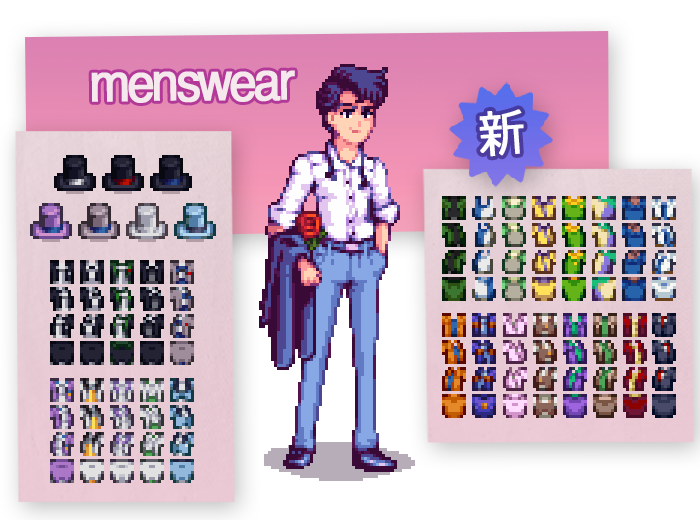
<style>
.page{position:relative;width:700px;height:520px}
.page>*{position:absolute;margin:0}
.t1{font:54px "Helvetica";letter-spacing:-0.06em;color:#f5e9ee;font-weight:bold;scale:0.9 1}
.t2{font:50px "Meiryo";letter-spacing:-0.05em;color:#fefefe;font-weight:bold;scale:0.9 1}
</style>
<div class="page">
<p class="t1" style="left:91px;top:70px;width:204px;height:33px;rotate:-1deg">menswear</p>
<p class="t2" style="left:479px;top:109px;width:45px;height:48px;rotate:-4deg">新</p>
</div>
